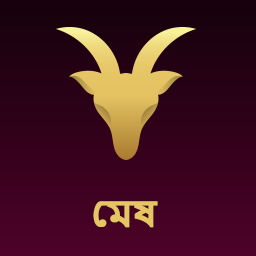
<style>
.page{position:relative;width:256px;height:256px}
.page>*{position:absolute;margin:0}
.t1{font:34.1px "NirmalaUI-Bold";letter-spacing:-0.05em;color:#e6c565;text-transform:uppercase;font-weight:bold}
</style>
<div class="page">
<p class="t1" style="left:93px;top:201px;width:65px;height:27px">মেষ</p>
</div>
